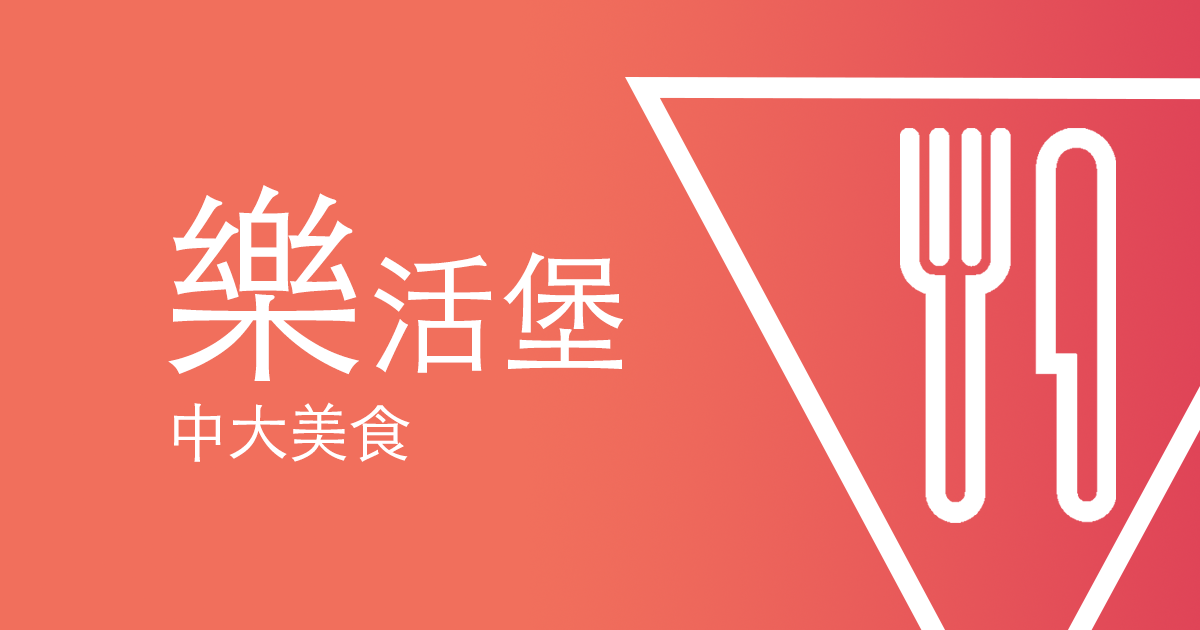
<style>
.page{position:relative;width:1200px;height:630px;background:#f16f5c}
.page>*{position:absolute;margin:0}
.t1{font:133.3px "STHeitiTC-Light";letter-spacing:-0.02em;color:#ffffff}
.t2{font:213.3px "STHeitiTC-Light";letter-spacing:-0.02em;color:#ffffff}
.t3{font:62.2px "STHeitiTC-Light";letter-spacing:-0.02em;color:#ffffff}
</style>
<div class="page">
<p class="t1" style="left:168px;top:185px;width:455px;height:196px"><span class="t2">樂</span>活堡</p>
<p class="t3" style="left:174px;top:402px;width:236px;height:60px">中大美食</p>
</div>
